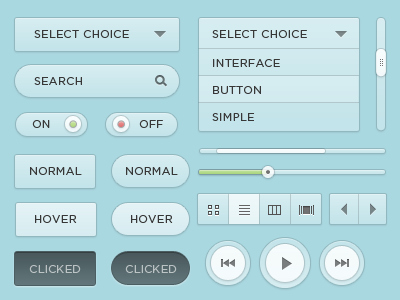
<style>
.page{position:relative;width:400px;height:300px;background:#aad8e1}
.page>*{position:absolute;margin:0}
.t1{font:11px "Gotham-Book";letter-spacing:0.025em;color:#373737;text-transform:uppercase}
.t2{font:11px/27px "Gotham-Book";letter-spacing:0.025em;color:#373737;text-transform:uppercase}
.t3{font:11px "Gotham-Book";letter-spacing:0.025em;color:#bbc3c4;text-transform:uppercase}
</style>
<div class="page">
<p class="t1" style="left:34px;top:30px;width:95px;height:8px">Select Choice</p>
<p class="t1" style="left:212px;top:30px;width:95px;height:8px">Select Choice</p>
<p class="t2" style="left:212px;top:59px;width:68px;height:62px">iNterface<br>button<br>simple</p>
<p class="t1" style="left:34px;top:77px;width:48px;height:8px">sEARCH</p>
<p class="t1" style="left:32px;top:120px;width:18px;height:8px">On</p>
<p class="t1" style="left:139px;top:120px;width:24px;height:8px">OFF</p>
<p class="t1" style="left:30px;top:167px;width:52px;height:8px">nORMAL</p>
<p class="t1" style="left:126px;top:167px;width:52px;height:8px">nORMAL</p>
<p class="t1" style="left:35px;top:215px;width:42px;height:8px">hOVER</p>
<p class="t1" style="left:131px;top:215px;width:42px;height:8px">hOVER</p>
<p class="t3" style="left:29px;top:265px;width:52px;height:8px">CLICKED</p>
<p class="t3" style="left:125px;top:265px;width:52px;height:8px">CLICKED</p>
</div>
